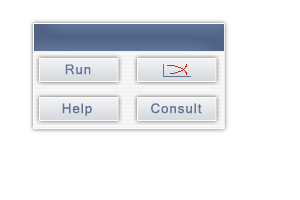
<style>
.page{position:relative;width:300px;height:200px;background:#ffffff}
.page>*{position:absolute;margin:0}
.t1{font:20px "Vrinda";letter-spacing:0.05em;color:#5f7499}
</style>
<div class="page">
<p class="t1" style="left:65px;top:64px;width:26px;height:11px">Run</p>
<p class="t1" style="left:62px;top:103px;width:30px;height:13px">Help</p>
<p class="t1" style="left:151px;top:103px;width:51px;height:11px">Consult</p>
</div>
